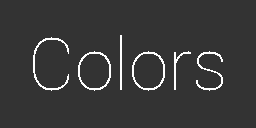
<style>
.page{position:relative;width:256px;height:128px;background:#333333}
.page>*{position:absolute;margin:0}
.t1{font:72px "Roboto-Thin";color:#ffffff}
</style>
<div class="page">
<p class="t1" style="left:33px;top:35px;width:190px;height:56px">Colors</p>
</div>
